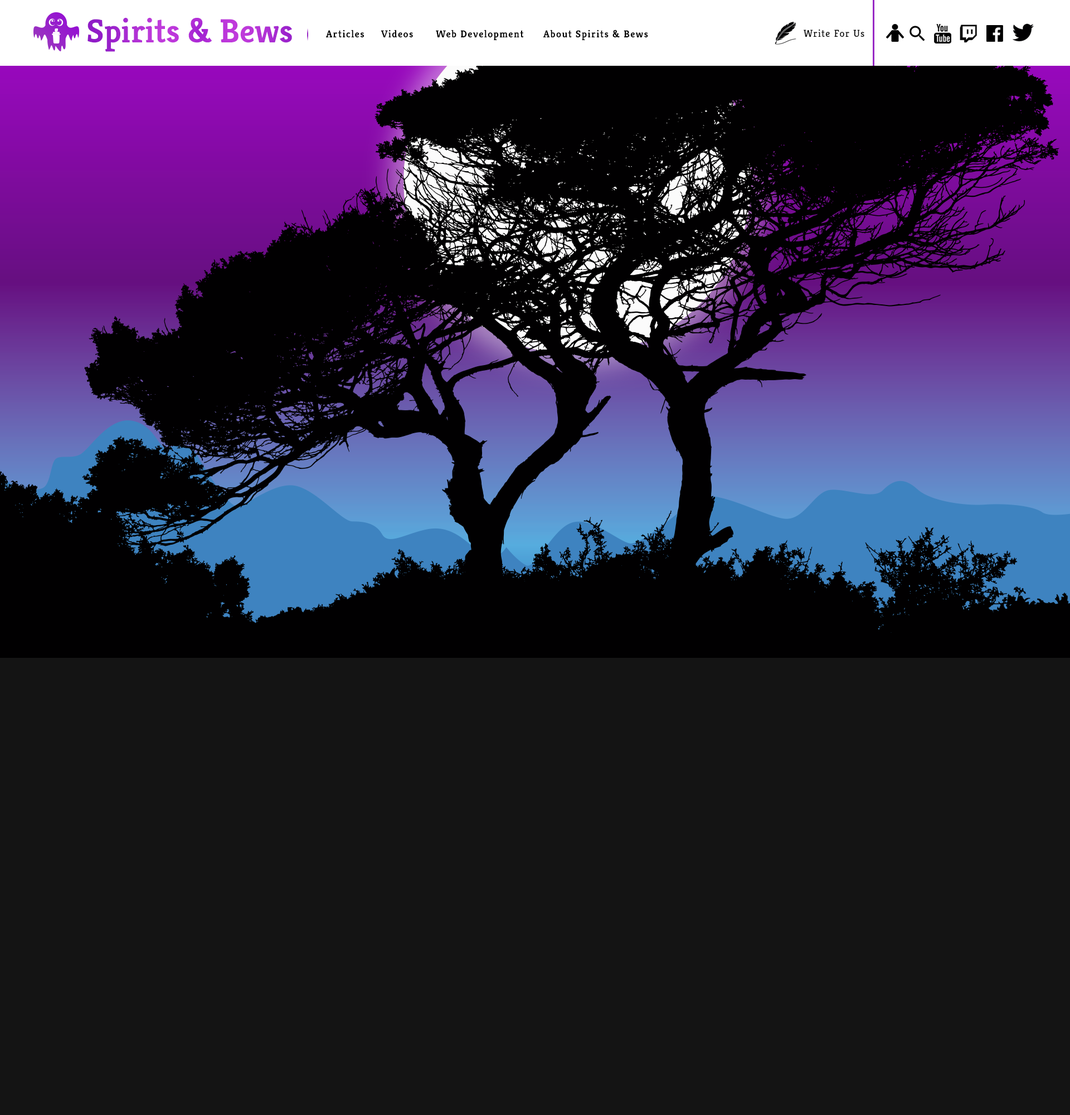
<style>
.page{position:relative;width:1070px;height:1115px;background:#141414}
.page>*{position:absolute;margin:0}
.t1{font:33.4px "Kreon-Bold";color:#b02fd5}
.t2{font:10px "Kreon-Bold";letter-spacing:0.08em;color:#000000}
.t3{font:10px "Kreon-Regular";letter-spacing:0.08em;color:#000000}
</style>
<div class="page">
<p class="t1" style="left:87px;top:18px;width:205px;height:34px">Spirits &amp; Bews</p>
<p class="t2" style="left:326px;top:30px;width:38px;height:7px">Articles</p>
<p class="t2" style="left:381px;top:30px;width:32px;height:7px">Videos</p>
<p class="t2" style="left:436px;top:30px;width:88px;height:10px">Web Development</p>
<p class="t2" style="left:543px;top:30px;width:105px;height:10px">About Spirits &amp; Bews</p>
<p class="t3" style="left:804px;top:29px;width:60px;height:8px">Write For Us</p>
</div>
